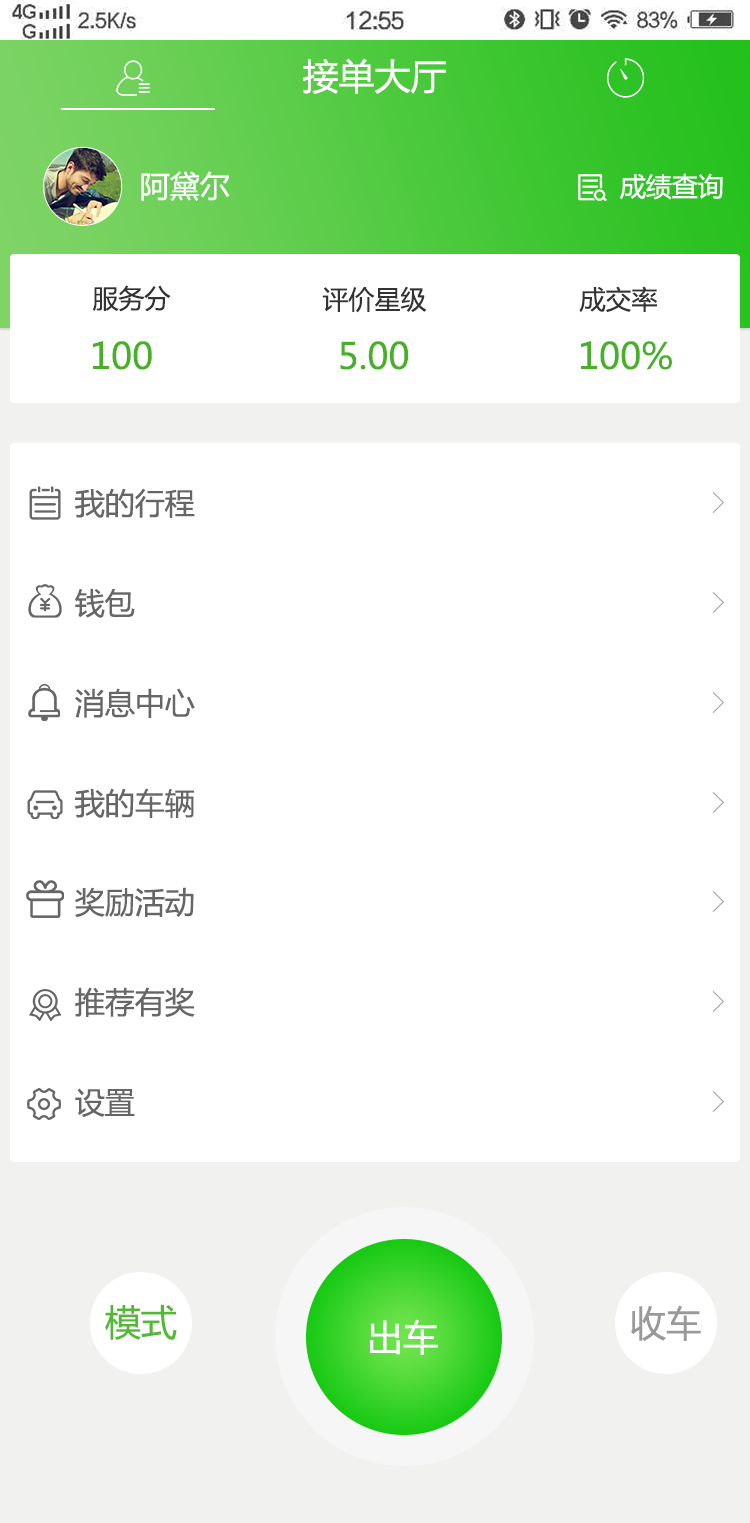
<style>
.page{position:relative;width:750px;height:1523px;background:#ffffff}
.page>*{position:absolute;margin:0}
.t1{font:36px "MicrosoftYaHei";color:#fffffe;text-transform:uppercase}
.t2{font:30px "MicrosoftYaHei";color:#ffffff;text-transform:uppercase}
.t3{font:26px "MicrosoftYaHei";color:#ffffff;text-transform:uppercase}
.t4{font:26px "MicrosoftYaHei";color:#333333;text-transform:uppercase}
.t5{font:36px "MicrosoftYaHei";color:#46b026;text-transform:uppercase}
.t6{font:30px "MicrosoftYaHei";color:#666666;text-transform:uppercase}
.t7{font:36px "MicrosoftYaHei";color:#51ba32;text-transform:uppercase}
.t8{font:36px "MicrosoftYaHei";color:#999999;text-transform:uppercase}
.t9{font:36px "MicrosoftYaHei";color:#ffffff;text-transform:uppercase}
</style>
<div class="page">
<p class="t1" style="left:303px;top:58px;width:143px;height:36px">接单大厅</p>
<p class="t2" style="left:141px;top:171px;width:89px;height:30px">阿黛尔</p>
<p class="t3" style="left:619px;top:173px;width:104px;height:27px">成绩查询</p>
<p class="t4" style="left:92px;top:285px;width:79px;height:27px">服务分</p>
<p class="t4" style="left:322px;top:286px;width:105px;height:27px">评价星级</p>
<p class="t4" style="left:579px;top:286px;width:78px;height:27px">成交率</p>
<p class="t5" style="left:93px;top:341px;width:59px;height:29px">100</p>
<p class="t5" style="left:340px;top:341px;width:69px;height:29px">5.00</p>
<p class="t5" style="left:581px;top:341px;width:91px;height:29px">100%</p>
<p class="t6" style="left:75px;top:488px;width:120px;height:30px">我的行程</p>
<p class="t6" style="left:75px;top:588px;width:60px;height:30px">钱包</p>
<p class="t6" style="left:75px;top:688px;width:120px;height:30px">消息中心</p>
<p class="t6" style="left:75px;top:788px;width:119px;height:30px">我的车辆</p>
<p class="t6" style="left:75px;top:887px;width:119px;height:30px">奖励活动</p>
<p class="t6" style="left:75px;top:987px;width:120px;height:30px">推荐有奖</p>
<p class="t6" style="left:75px;top:1088px;width:60px;height:29px">设置</p>
<p class="t7" style="left:105px;top:1304px;width:72px;height:36px">模式</p>
<p class="t8" style="left:631px;top:1305px;width:70px;height:36px">收车</p>
<p class="t9" style="left:370px;top:1319px;width:68px;height:36px">出车</p>
</div>
